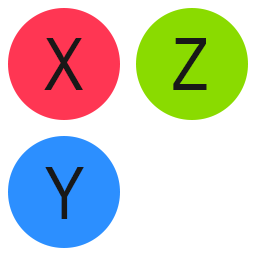
<style>
.page{position:relative;width:256px;height:256px;background:#ffffff}
.page>*{position:absolute;margin:0}
.t1{font:72px "ArialNarrow";color:#181818}
</style>
<div class="page">
<p class="t1" style="left:44px;top:38px;width:39px;height:52px">X</p>
<p class="t1" style="left:173px;top:38px;width:34px;height:52px">Z</p>
<p class="t1" style="left:45px;top:167px;width:39px;height:52px">Y</p>
</div>
